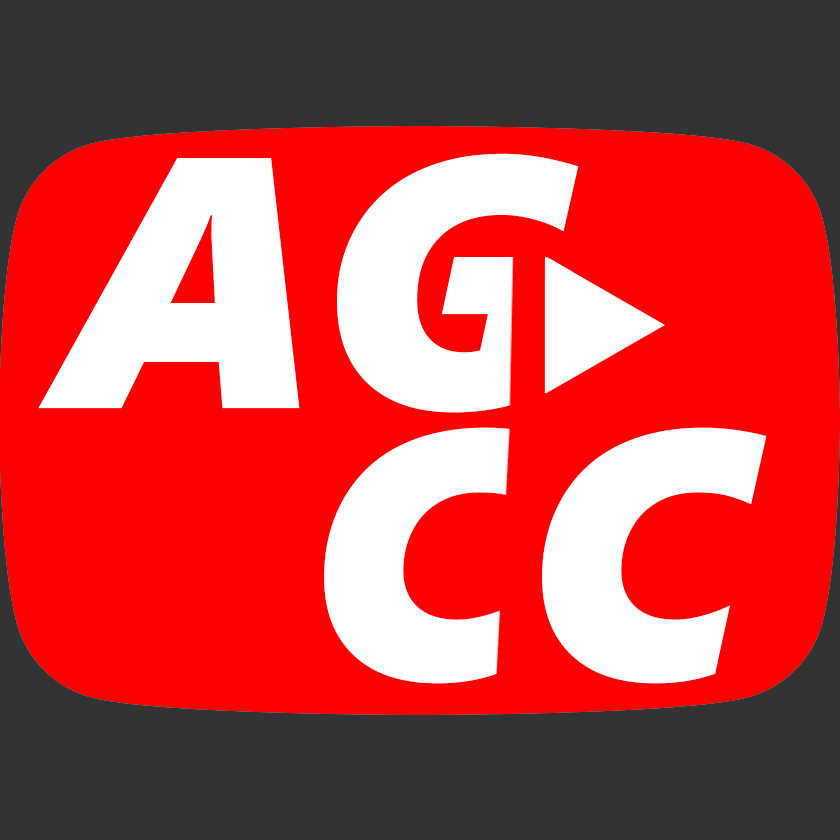
<style>
.page{position:relative;width:840px;height:840px;background:#ff0000}
.page>*{position:absolute;margin:0}
.t1{font:356.8px "SegoeUIBlack-Italic";color:#ffffff}
.t2{font:353.4px "SegoeUIBlack-Italic";color:#ffffff}
</style>
<div class="page">
<p class="t1" style="left:38px;top:153px;width:541px;height:260px">AG</p>
<p class="t2" style="left:324px;top:427px;width:443px;height:257px">CC</p>
</div>
